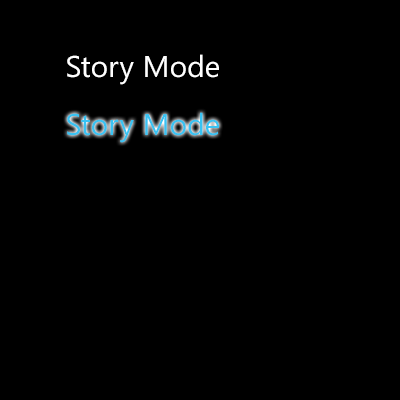
<style>
.page{position:relative;width:400px;height:400px;background:#000000}
.page>*{position:absolute;margin:0}
.t1{font:30px "SegoeUISymbol";color:#ffffff}
.t2{font:30px "SegoeUISymbol";color:#39c3f3}
</style>
<div class="page">
<p class="t1" style="left:67px;top:54px;width:152px;height:31px">Story Mode</p>
<p class="t2" style="left:67px;top:112px;width:152px;height:31px">Story Mode</p>
</div>
